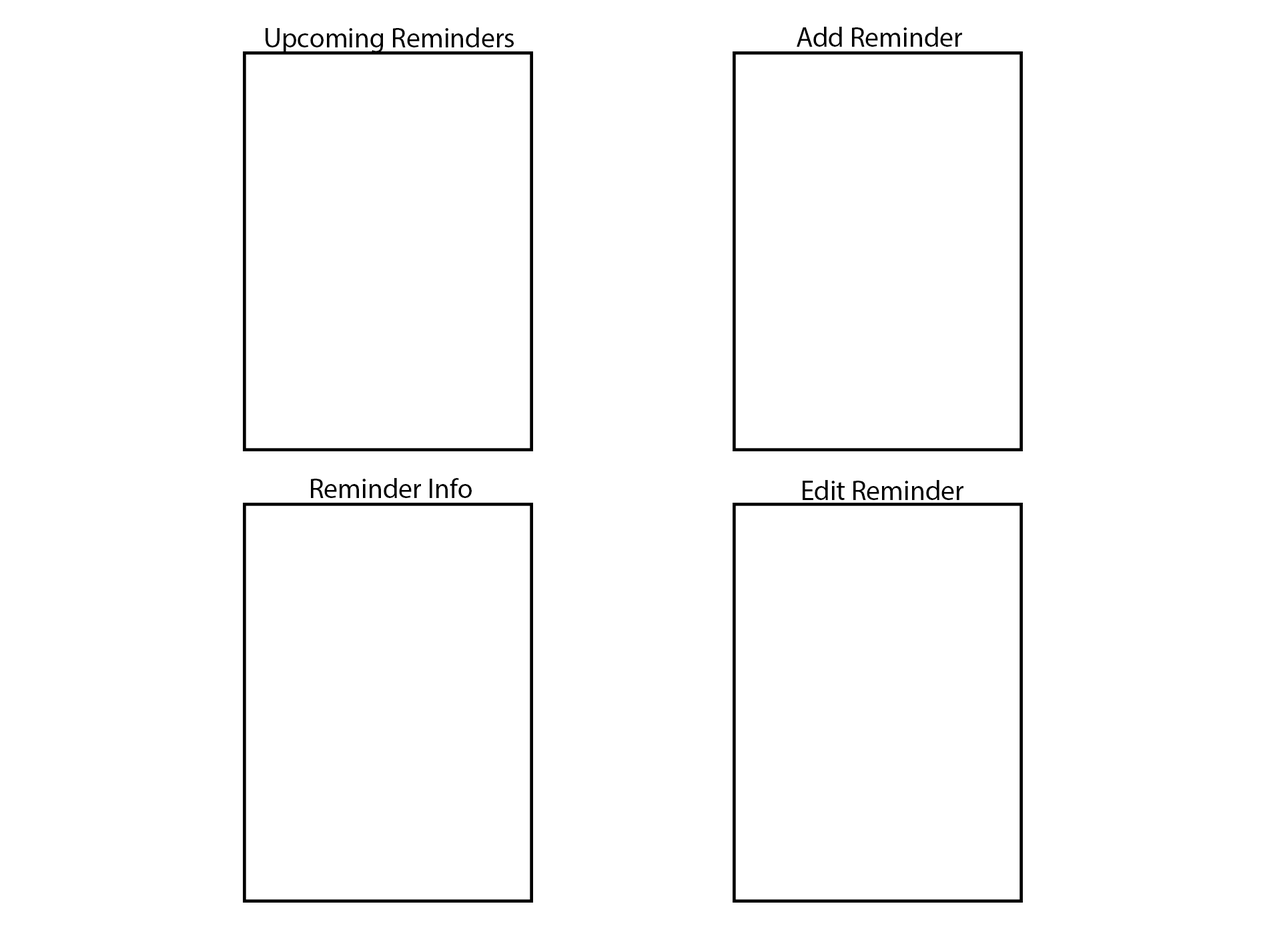
<style>
.page{position:relative;width:1261px;height:946px;background:#ffffff}
.page>*{position:absolute;margin:0}
.t1{font:27.8px "MyriadPro-Regular";color:#000000}
</style>
<div class="page">
<p class="t1" style="left:266px;top:27px;width:248px;height:26px">Upcoming Reminders</p>
<p class="t1" style="left:797px;top:27px;width:165px;height:20px">Add Reminder</p>
<p class="t1" style="left:311px;top:478px;width:161px;height:20px">Reminder Info</p>
<p class="t1" style="left:803px;top:480px;width:161px;height:20px">Edit Reminder</p>
</div>
